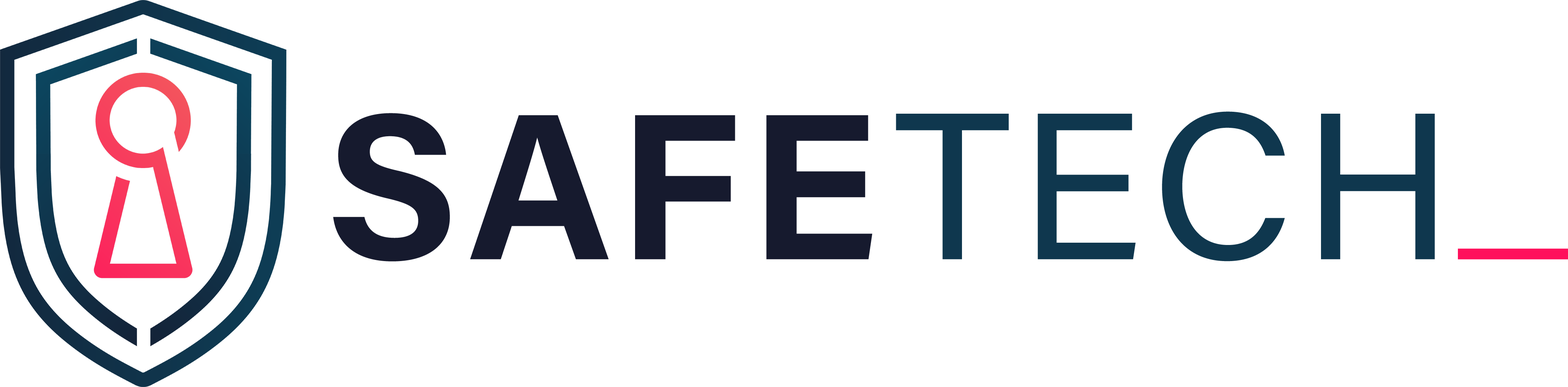
<style>
.page{position:relative;width:1568px;height:387px;background:#ffffff}
.page>*{position:absolute;margin:0}
.t1{font:208.7px "AcuminPro-Bold";letter-spacing:0.04em;color:#161a2e;text-transform:uppercase}
.t2{font:208.7px "AcuminPro-Regular";letter-spacing:0.04em;color:#0f374e;text-transform:uppercase}
.t3{font:208.7px "AcuminPro-Regular";letter-spacing:0.04em;color:#ff105c;text-transform:uppercase}
</style>
<div class="page">
<p class="t1" style="left:333px;top:111px;width:1102px;height:150px">Safe<span class="t2">Tech</span></p>
<p class="t3" style="left:1458px;top:248px;width:110px;height:11px">_</p>
</div>
